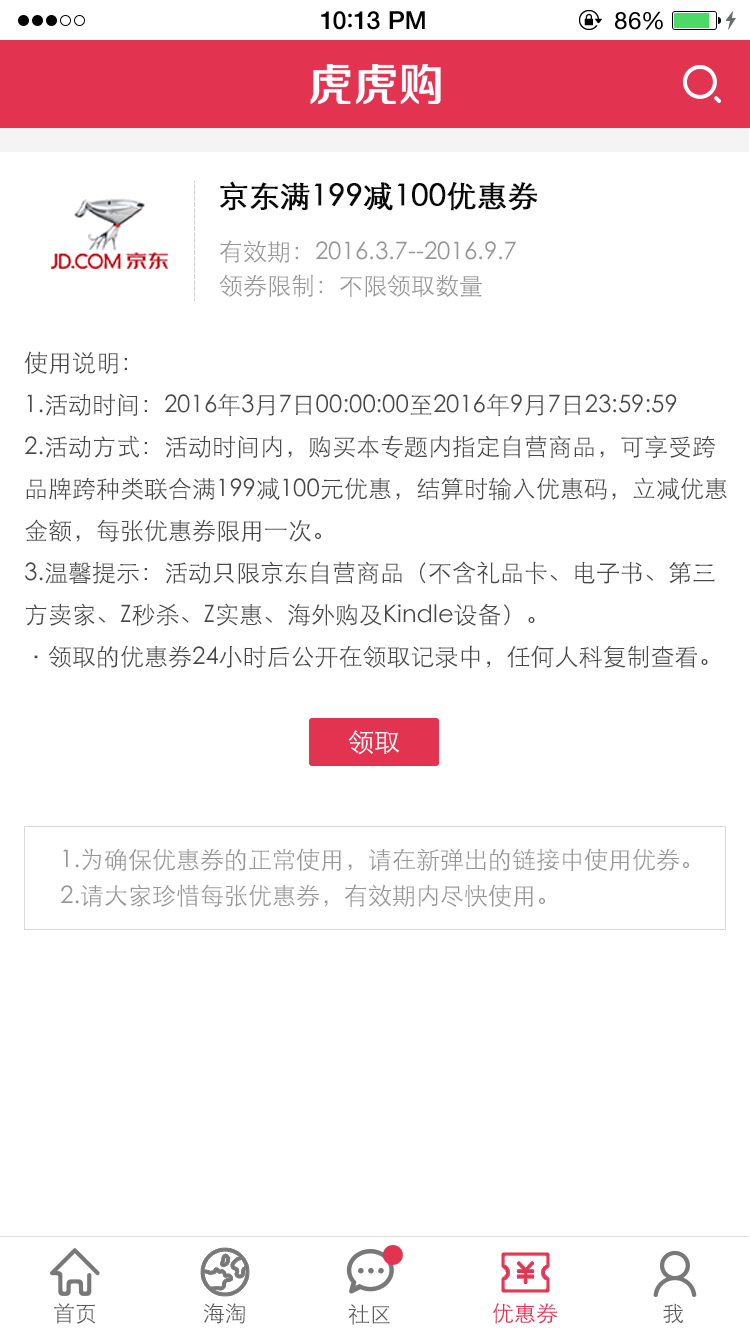
<style>
.page{position:relative;width:750px;height:1334px;background:#ffffff}
.page>*{position:absolute;margin:0}
.t1{font:25px "HelveticaNeue-Medium";letter-spacing:0.015em;color:#000000}
.t2{font:25px "ArialRoundedMTBold";letter-spacing:0.015em;color:#000000}
.t3{font:24px "HelveticaNeue";letter-spacing:0.03em;color:#000000}
.t4{font:30px "STXihei";color:#0a0a0a;font-weight:bold}
.t5{font:24px "STXihei";color:#969696}
.t6{font:24px/36px "STXihei";color:#48484a}
.t7{font:26px "STXihei";color:#ffffff}
.t8{font:24px/36px "STXihei";color:#969696}
.t9{font:21.9px "STXihei";color:#5a5a5a}
.t10{font:21.9px "STXihei";color:#e23351}
</style>
<div class="page">
<p class="t1" style="left:321px;top:11px;width:104px;height:19px">10<span class="t2">:</span>13 PM</p>
<p class="t3" style="left:615px;top:11px;width:48px;height:19px">86%</p>
<p class="t4" style="left:220px;top:181px;width:318px;height:30px">京东满199减100优惠券</p>
<p class="t5" style="left:220px;top:240px;width:296px;height:23px">有效期：2016.3.7--2016.9.7</p>
<p class="t5" style="left:219px;top:274px;width:263px;height:23px">领券限制：不限领取数量</p>
<p class="t6" style="left:24px;top:351px;width:703px;height:317px">使用说明：<br>1.活动时间：2016年3月7日00:00:00至2016年9月7日23:59:59<br>2.活动方式：活动时间内，购买本专题内指定自营商品，可享受跨<br>品牌跨种类联合满199减100元优惠，结算时输入优惠码，立减优惠<br>金额，每张优惠券限用一次。<br>3.温馨提示：活动只限京东自营商品（不含礼品卡、电子书、第三<br>方卖家、Z秒杀、Z实惠、海外购及Kindle设备）。<br>·领取的优惠券24小时后公开在领取记录中，任何人科复制查看。</p>
<p class="t7" style="left:348px;top:730px;width:51px;height:25px">领取</p>
<p class="t8" style="left:60px;top:848px;width:629px;height:59px">1.为确保优惠券的正常使用，请在新弹出的链接中使用优券。<br>2.请大家珍惜每张优惠券，有效期内尽快使用。</p>
<p class="t9" style="left:54px;top:1303px;width:42px;height:21px">首页</p>
<p class="t9" style="left:203px;top:1303px;width:42px;height:21px">海淘</p>
<p class="t9" style="left:348px;top:1304px;width:42px;height:21px">社区</p>
<p class="t10" style="left:492px;top:1303px;width:65px;height:21px">优惠券</p>
<p class="t9" style="left:663px;top:1303px;width:20px;height:20px">我</p>
</div>
